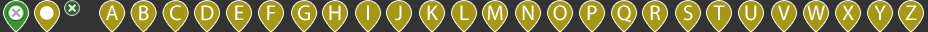
<style>
.page{position:relative;width:928px;height:32px;background:#333333}
.page>*{position:absolute;margin:0}
.t1{font:21.4px "MyriadPro-Regular";color:#ffffff}
</style>
<div class="page">
<p class="t1" style="left:106px;top:5px;width:12px;height:15px">A</p>
<p class="t1" style="left:139px;top:5px;width:10px;height:16px">B</p>
<p class="t1" style="left:170px;top:5px;width:11px;height:16px">C</p>
<p class="t1" style="left:201px;top:5px;width:13px;height:16px">D</p>
<p class="t1" style="left:235px;top:5px;width:9px;height:15px">E</p>
<p class="t1" style="left:267px;top:5px;width:8px;height:15px">F</p>
<p class="t1" style="left:298px;top:5px;width:12px;height:16px">G</p>
<p class="t1" style="left:329px;top:5px;width:12px;height:15px">H</p>
<p class="t1" style="left:367px;top:5px;width:2px;height:15px">I</p>
<p class="t1" style="left:395px;top:5px;width:7px;height:16px">J</p>
<p class="t1" style="left:427px;top:5px;width:11px;height:15px">K</p>
<p class="t1" style="left:460px;top:5px;width:9px;height:15px">L</p>
<p class="t1" style="left:487px;top:5px;width:16px;height:15px">M</p>
<p class="t1" style="left:522px;top:5px;width:12px;height:15px">N</p>
<p class="t1" style="left:553px;top:5px;width:14px;height:16px">O</p>
<p class="t1" style="left:587px;top:5px;width:10px;height:15px">P</p>
<p class="t1" style="left:617px;top:5px;width:14px;height:18px">Q</p>
<p class="t1" style="left:650px;top:5px;width:11px;height:15px">R</p>
<p class="t1" style="left:683px;top:5px;width:10px;height:16px">S</p>
<p class="t1" style="left:713px;top:5px;width:12px;height:15px">T</p>
<p class="t1" style="left:745px;top:5px;width:12px;height:16px">U</p>
<p class="t1" style="left:778px;top:5px;width:12px;height:15px">V</p>
<p class="t1" style="left:807px;top:5px;width:18px;height:15px">W</p>
<p class="t1" style="left:842px;top:5px;width:12px;height:15px">X</p>
<p class="t1" style="left:874px;top:5px;width:12px;height:15px">Y</p>
<p class="t1" style="left:905px;top:5px;width:12px;height:15px">Z</p>
</div>
